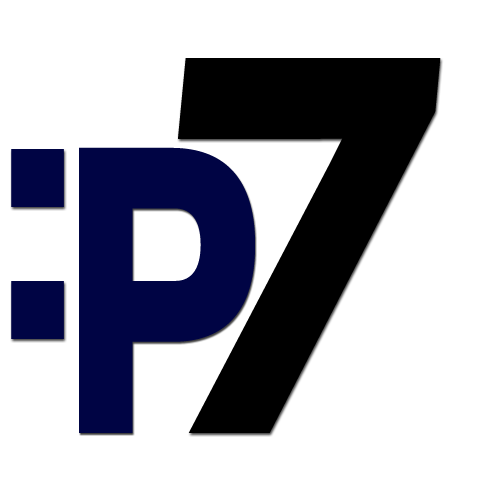
<style>
.page{position:relative;width:500px;height:500px;background:#ffffff}
.page>*{position:absolute;margin:0}
.t1{font:491px "GalaxiePolaris-HeavyItalic";letter-spacing:-0.04em;color:#000000;scale:0.79 1}
.t2{font:366px "GalaxiePolaris-Heavy";letter-spacing:-0.04em;color:#000444;scale:0.79 1}
</style>
<div class="page">
<p class="t1" style="left:178px;top:58px;width:263px;height:375px">7</p>
<p class="t2" style="left:79px;top:147px;width:176px;height:286px">P</p>
</div>
